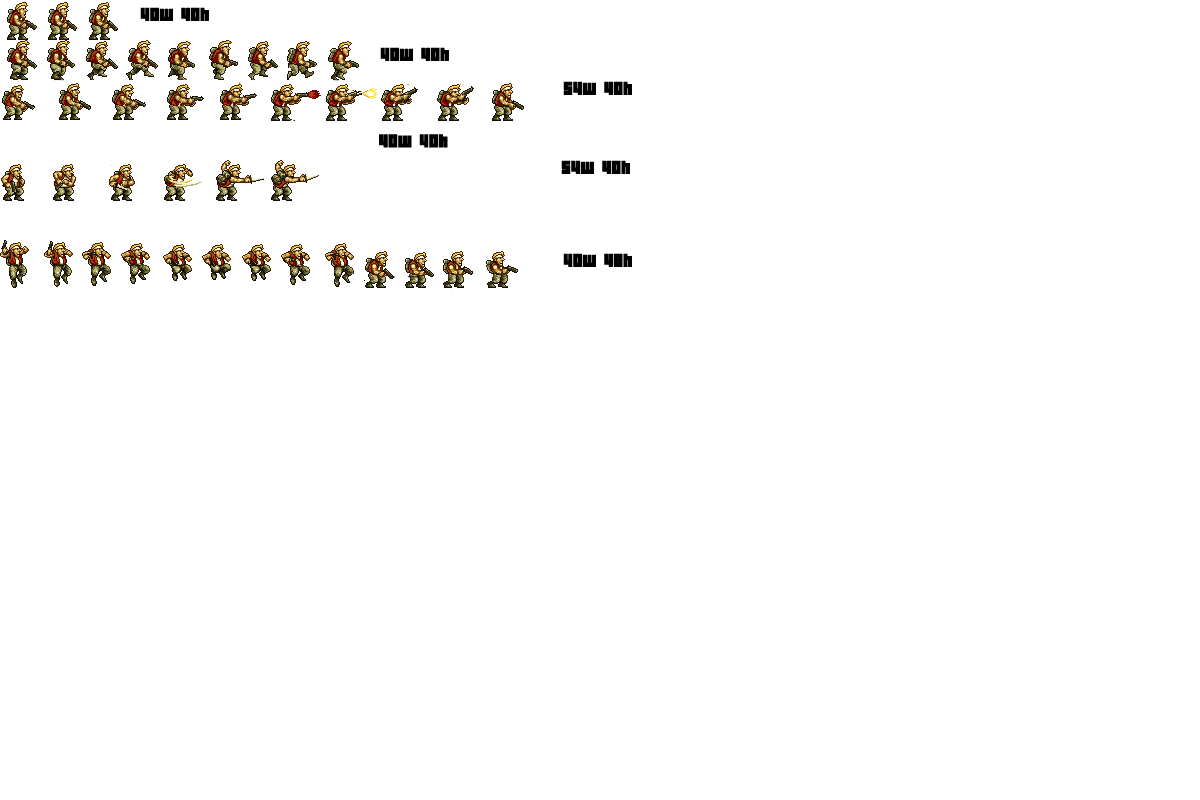
<style>
.page{position:relative;width:1200px;height:800px;background:#ffffff}
.page>*{position:absolute;margin:0}
.t1{font:16px "04b19";color:#000000;font-weight:bold}
.t2{font:12px "04b19";color:#000000;font-weight:bold}
</style>
<div class="page">
<p class="t1" style="left:140px;top:7px;width:69px;height:14px">40w 40h</p>
<p class="t1" style="left:380px;top:47px;width:69px;height:14px">40w 40h</p>
<p class="t1" style="left:563px;top:81px;width:69px;height:14px">54w 40h</p>
<p class="t2" style="left:379px;top:134px;width:69px;height:14px">40w 40h</p>
<p class="t1" style="left:561px;top:160px;width:69px;height:14px">54w 40h</p>
<p class="t1" style="left:563px;top:253px;width:69px;height:14px">40w 48h</p>
</div>
